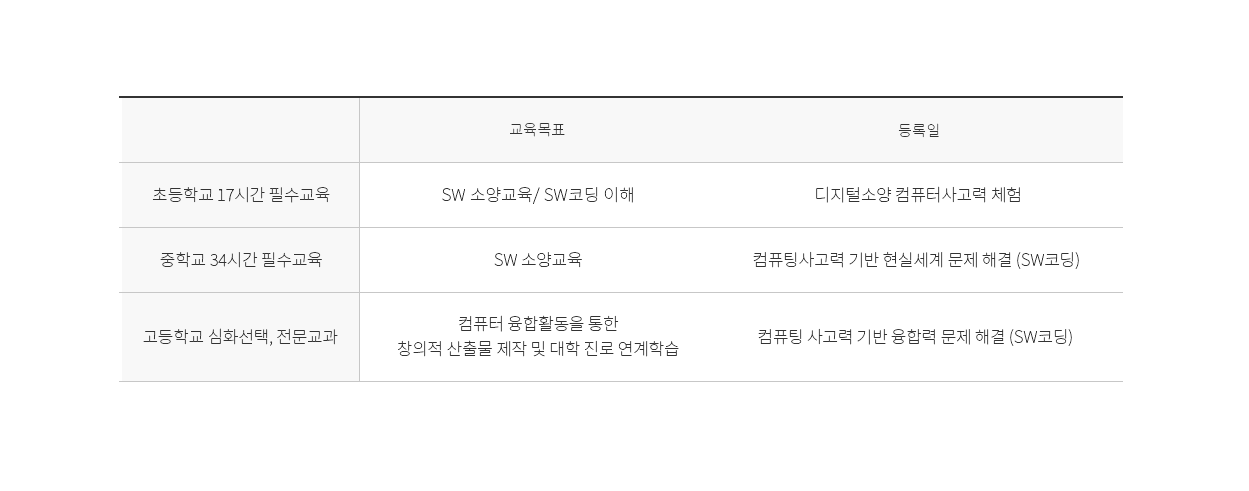
<style>
.page{position:relative;width:1249px;height:491px;background:#ffffff}
.page>*{position:absolute;margin:0}
.t1{font:15px "NotoSansKR-Thin";letter-spacing:0.02em;color:#333333}
.t2{font:17px "NotoSansKR-Thin";letter-spacing:-0.015em;color:#333333}
.t3{font:17px "NotoSansKR-Thin";letter-spacing:0.01em;color:#333333}
.t4{font:17px/25px "NotoSansKR-Thin";letter-spacing:-0.015em;color:#333333}
</style>
<div class="page">
<p class="t1" style="left:510px;top:123px;width:55px;height:14px">교육목표</p>
<p class="t1" style="left:898px;top:123px;width:41px;height:15px">등록일</p>
<p class="t2" style="left:152px;top:187px;width:178px;height:16px">초등학교 17시간 필수교육</p>
<p class="t3" style="left:442px;top:187px;width:191px;height:17px">SW 소양교육/ SW코딩 이해</p>
<p class="t2" style="left:816px;top:186px;width:204px;height:17px">디지털소양 컴퓨터사고력 체험</p>
<p class="t2" style="left:160px;top:252px;width:162px;height:16px">중학교 34시간 필수교육</p>
<p class="t2" style="left:494px;top:252px;width:88px;height:16px">SW 소양교육</p>
<p class="t2" style="left:753px;top:251px;width:326px;height:18px">컴퓨팅사고력 기반 현실세계 문제 해결 (SW코딩)</p>
<p class="t4" style="left:398px;top:315px;width:281px;height:42px;text-align:center">컴퓨터 융합활동을 통한<br>창의적 산출물 제작 및 대학 진로 연계학습</p>
<p class="t2" style="left:143px;top:328px;width:195px;height:18px">고등학교 심화선택, 전문교과</p>
<p class="t2" style="left:758px;top:328px;width:314px;height:18px">컴퓨팅 사고력 기반 융합력 문제 해결 (SW코딩)</p>
</div>
